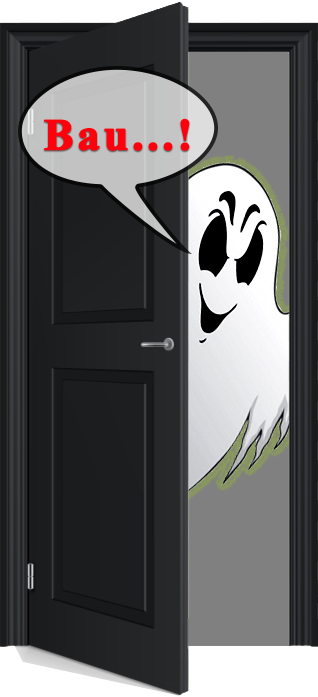
<style>
.page{position:relative;width:318px;height:697px}
.page>*{position:absolute;margin:0}
.t1{font:44.3px "TimesNewRomanPS-BoldMT";letter-spacing:0.06em;color:#ff000c;font-weight:bold}
</style>
<div class="page">
<p class="t1" style="left:44px;top:118px;width:146px;height:33px">Bau...!</p>
</div>
